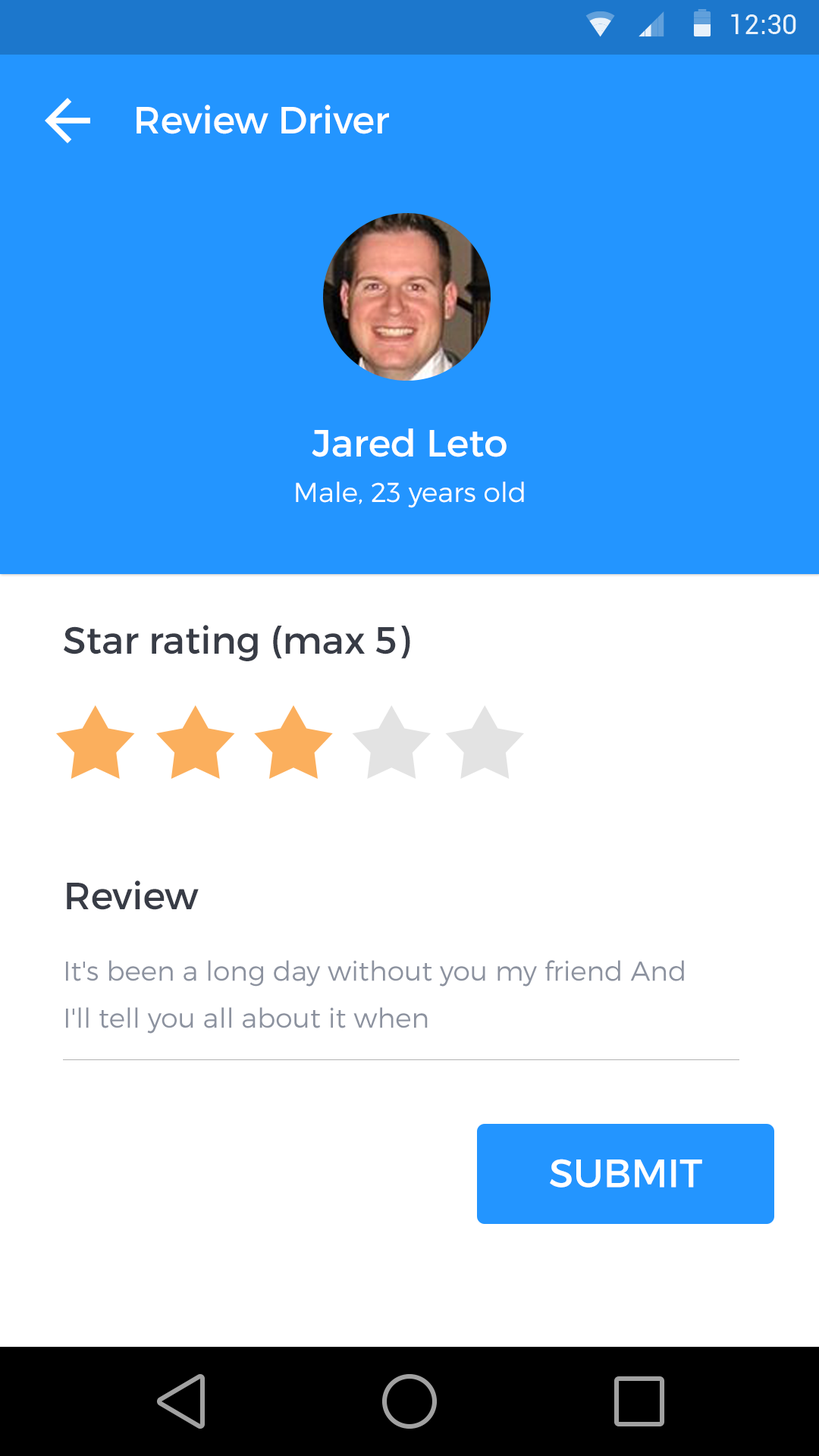
<style>
.page{position:relative;width:819px;height:1456px;background:#ffffff}
.page>*{position:absolute;margin:0}
.t1{font:37.9px "Montserrat-Regular";color:#ffffff}
.t2{font:27.3px "Montserrat-Light";color:#ffffff}
.t3{font:37.9px "Montserrat-Regular";color:#383c46}
.t4{font:27.3px/47px "Montserrat-Light";color:#8c929f}
.t5{font:39.4px "Montserrat-Regular";color:#ffffff;text-transform:uppercase}
</style>
<div class="page">
<p class="t1" style="left:136px;top:105px;width:253px;height:29px">Review Driver</p>
<p class="t1" style="left:312px;top:428px;width:195px;height:29px">Jared Leto</p>
<p class="t2" style="left:296px;top:482px;width:228px;height:26px">Male, 23 years old</p>
<p class="t3" style="left:64px;top:625px;width:346px;height:36px">Star rating (max 5)</p>
<p class="t3" style="left:67px;top:880px;width:132px;height:30px">Review</p>
<p class="t4" style="left:66px;top:960px;width:618px;height:74px">It's been a long day without you my friend And I'll tell you all about it when</p>
<p class="t5" style="left:550px;top:1159px;width:152px;height:29px">SUBMIT</p>
</div>
